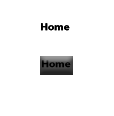
<style>
.page{position:relative;width:114px;height:116px;background:#ffffff}
.page>*{position:absolute;margin:0}
.t1{font:10.3px "MyriadPro-Bold";color:#000000;scale:1.07 1}
</style>
<div class="page">
<p class="t1" style="left:41px;top:23px;width:29px;height:8px">Home</p>
<p class="t1" style="left:41px;top:23px;width:29px;height:8px">Home</p>
<p class="t1" style="left:42px;top:60px;width:29px;height:8px">Home</p>
</div>
